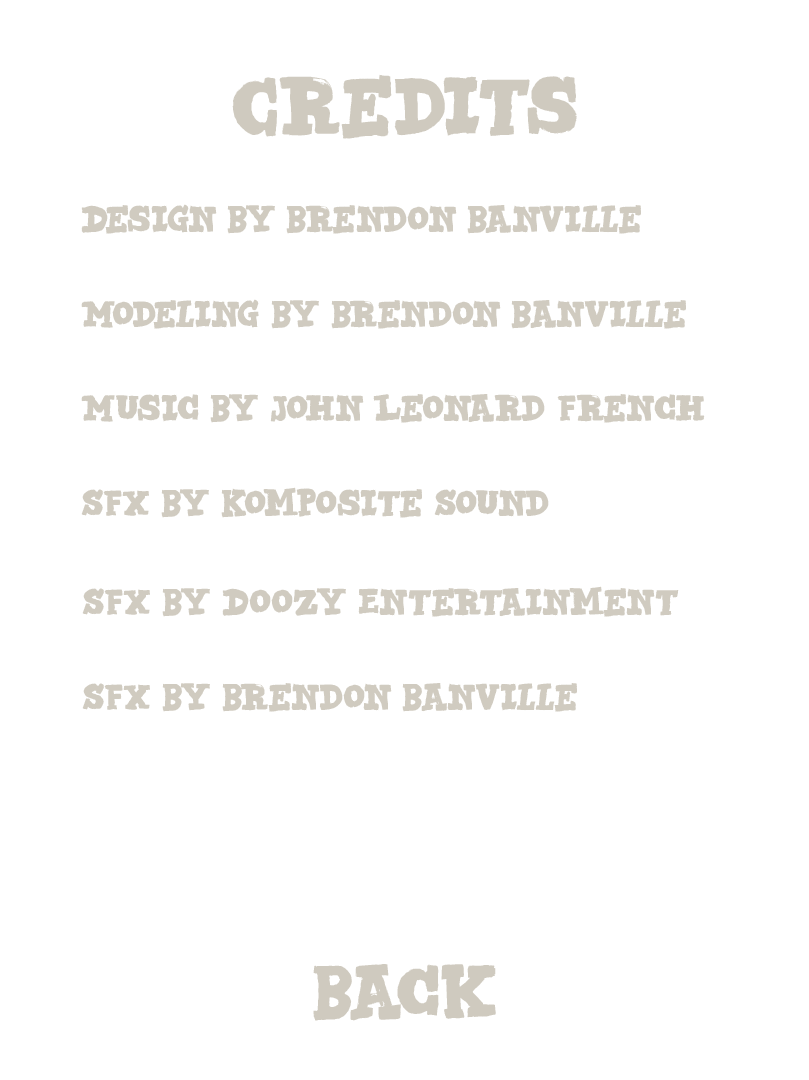
<style>
.page{position:relative;width:809px;height:1080px;background:#ffffff}
.page>*{position:absolute;margin:0}
.t1{font:83.3px "DKBadMedicine-Regular";color:#cfcabf}
.t2{font:37.5px "DKBadMedicine-Regular";color:#d0cbc0}
.t3{font:75px "DKBadMedicine-Regular";color:#cfcabf}
</style>
<div class="page">
<p class="t1" style="left:232px;top:74px;width:345px;height:65px">Credits</p>
<p class="t2" style="left:81px;top:204px;width:560px;height:30px">Design By Brendon Banville</p>
<p class="t2" style="left:81px;top:299px;width:605px;height:30px">Modeling By Brendon Banville</p>
<p class="t2" style="left:81px;top:394px;width:624px;height:29px">Music By John Leonard French</p>
<p class="t2" style="left:81px;top:487px;width:468px;height:31px">SFX By Komposite Sound</p>
<p class="t2" style="left:82px;top:586px;width:597px;height:31px">SFX By Doozy Entertainment</p>
<p class="t2" style="left:82px;top:683px;width:495px;height:29px">SFX By Brendon Banville</p>
<p class="t3" style="left:313px;top:964px;width:183px;height:57px">Back</p>
</div>
